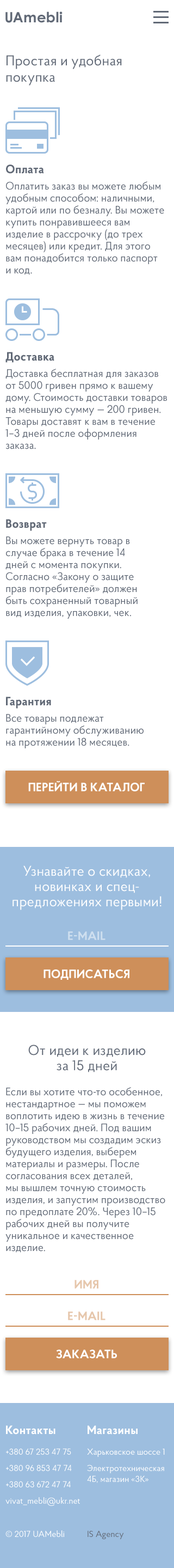
<style>
.page{position:relative;width:174px;height:1568px;background:#ffffff}
.page>*{position:absolute;margin:0}
.t1{font:14.2px "CenturyGothic-Bold";letter-spacing:0.01em;color:#616976}
.t2{font:14.2px/16.3px "ProbaPro-Regular";letter-spacing:0.01em;color:#616976}
.t3{font:12px "ProbaPro-Bold";letter-spacing:0.01em;color:#616976}
.t4{font:10.9px/12px "ProbaPro-Regular";color:#616976}
.t5{font:12px "ProbaPro-Bold";letter-spacing:0.01em;color:#ffffff;text-transform:uppercase}
.t6{font:14.2px/15.2px "ProbaPro-Regular";letter-spacing:0.01em;color:#ffffff}
.t7{font:12px "ProbaPro-Bold";letter-spacing:0.01em;color:#cedfef;text-transform:uppercase}
.t8{font:14.2px/15.2px "ProbaPro-Regular";letter-spacing:0.01em;color:#616976}
.t9{font:12px "ProbaPro-Bold";letter-spacing:0.01em;color:#e6c7ac;text-transform:uppercase}
.t10{font:12px "ProbaPro-Bold";letter-spacing:0.01em;color:#ffffff}
.t11{font:8.7px/16.3px "ProbaPro-Regular";color:#ffffff}
.t12{font:8.7px/10.9px "ProbaPro-Regular";color:#ffffff}
.t13{font:8.7px "ProbaPro-Regular";color:#ffffff}
.t14{font:8.7px "ProbaPro-Regular";color:#616976}
</style>
<div class="page">
<p class="t1" style="left:5px;top:11px;width:58px;height:12px">UAmebli</p>
<p class="t2" style="left:6px;top:54px;width:116px;height:32px">Простая и удобная покупка</p>
<p class="t3" style="left:6px;top:164px;width:38px;height:10px">Оплата</p>
<p class="t4" style="left:5px;top:181px;width:159px;height:94px">Оплатить заказ вы можете любым удобным способом: наличными, картой или по безналу. Вы можете купить понравившееся вам изделие в рассрочку (до трех месяцев) или кредит. Для этого вам понадобится только паспорт <br>и код.</p>
<p class="t3" style="left:5px;top:352px;width:49px;height:11px">Доставка</p>
<p class="t4" style="left:5px;top:369px;width:162px;height:80px">Доставка бесплатная для заказов от 5000 гривен прямо к вашему дому. Стоимость доставки товаров на меньшую сумму — 200 гривен. Товары доставят к вам в течение 1–3 дней после оформления заказа.</p>
<p class="t3" style="left:6px;top:519px;width:41px;height:12px">Возврат</p>
<p class="t4" style="left:5px;top:536px;width:133px;height:83px">Вы можете вернуть товар в случае брака в течение 14 дней с момента покупки. Согласно «Закону о защите прав потребителей» должен быть сохраненный товарный вид изделия, упаковки, чек.</p>
<p class="t3" style="left:6px;top:697px;width:45px;height:12px">Гарантия</p>
<p class="t4" style="left:6px;top:714px;width:138px;height:34px">Все товары подлежат гарантийному обслуживанию <br>на протяжении 18 месяцев.</p>
<p class="t5" style="left:28px;top:780px;width:117px;height:11px">перейти в Каталог</p>
<p class="t6" style="left:13px;top:865px;width:149px;height:45px;text-align:center">Узнавайте о скидках, новинках и спец-<br>предложениях первыми!</p>
<p class="t7" style="left:68px;top:931px;width:38px;height:9px">E-mail</p>
<p class="t5" style="left:44px;top:969px;width:86px;height:11px">Подписаться</p>
<p class="t8" style="left:28px;top:1045px;width:118px;height:27px;text-align:center">От идеи к изделию <br>за 15 дней</p>
<p class="t4" style="left:5px;top:1087px;width:161px;height:166px">Если вы хотите что-то особенное, нестандартное — мы поможем воплотить идею в жизнь в течение 10–15 рабочих дней. Под вашим руководством мы создадим эскиз будущего изделия, выберем материалы и размеры. После согласования всех деталей, <br>мы вышлем точную стоимость изделия, и запустим производство по предоплате 20%. Через 10–15 рабочих дней вы получите уникальное и качественное изделие.</p>
<p class="t9" style="left:75px;top:1280px;width:24px;height:9px">Имя</p>
<p class="t9" style="left:68px;top:1311px;width:38px;height:9px">E-mail</p>
<p class="t5" style="left:56px;top:1350px;width:61px;height:8px">Заказать</p>
<p class="t10" style="left:6px;top:1425px;width:50px;height:10px">Контакты</p>
<p class="t10" style="left:88px;top:1425px;width:50px;height:10px">Магазины</p>
<p class="t11" style="left:5px;top:1448px;width:75px;height:58px">+380 67 253 47 75<br>+380 96 853 47 74<br>+380 63 672 47 74<br>vivat_mebli@ukr.net</p>
<p class="t11" style="left:87px;top:1448px;width:78px;height:35px">Харьковское шоссе 1 <br>Электротехническая <span class="t12">4Б, магазин «3К»</span></p>
<p class="t13" style="left:5px;top:1530px;width:59px;height:7px">© 2017 UAMebli</p>
<p class="t14" style="left:88px;top:1530px;width:36px;height:9px">IS Agency</p>
</div>
